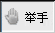
<style>
.page{position:relative;width:55px;height:33px;background:#e9e9e9}
.page>*{position:absolute;margin:0}
.t1{font:12px "NSimSun";color:#000000}
</style>
<div class="page">
<p class="t1" style="left:25px;top:12px;width:23px;height:11px">举手</p>
</div>
